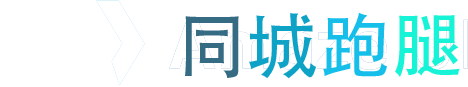
<style>
.page{position:relative;width:468px;height:87px;background:#ffffff}
.page>*{position:absolute;margin:0}
.t1{font:72px "AdobeHeitiStd-Regular";color:#356c83}
.t2{font:72px "AdobeHeitiStd-Regular";color:#0fa2c7}
.t3{font:72px "AdobeHeitiStd-Regular";color:#15bfe9}
.t4{font:72px "AdobeHeitiStd-Regular";color:#16f3d6}
</style>
<div class="page">
<p class="t1" style="left:185px;top:12px;width:275px;height:67px">同<span class="t2">城</span><span class="t3">跑</span><span class="t4">腿</span></p>
</div>
